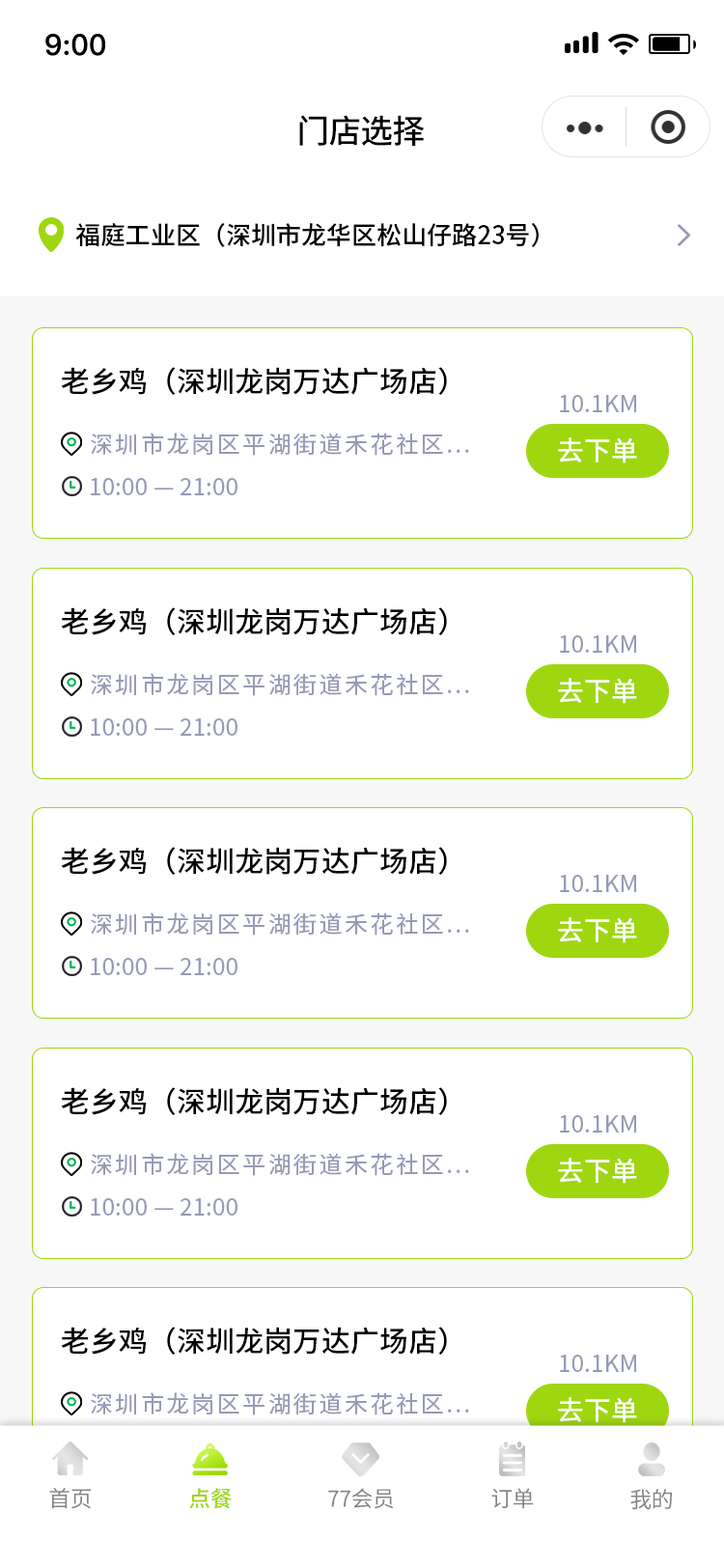
<style>
.page{position:relative;width:724px;height:1568px;background:#ffffff}
.page>*{position:absolute;margin:0}
.t1{font:29px "PingFang-SC-Bold";letter-spacing:0.02em;color:#000000}
.t2{font:32.8px "SourceHanSansCN-Medium";letter-spacing:-0.02em;color:#000000}
.t3{font:25.1px "SourceHanSansCN-Medium";color:#000000}
.t4{font:29px "SourceHanSansCN-Medium";color:#000000}
.t5{font:23.2px "SourceHanSansCN-Regular";letter-spacing:0.01em;color:#969ab6}
.t6{font:23.2px "SourceHanSansCN-Regular";letter-spacing:0.1em;color:#969ab6}
.t7{font:27px "SourceHanSansCN-Medium";color:#ffffff}
.t8{font:22.2px "SourceHanSansCN-Regular";letter-spacing:-0.02em;color:#838383}
.t9{font:22.2px "SourceHanSansCN-Medium";letter-spacing:-0.02em;color:#9ed710}
</style>
<div class="page">
<p class="t1" style="left:45px;top:34px;width:60px;height:22px">9:00</p>
<p class="t2" style="left:299px;top:115px;width:126px;height:31px">门店选择</p>
<p class="t3" style="left:75px;top:222px;width:464px;height:25px">福庭工业区（深圳市龙华区松山仔路23号）</p>
<p class="t4" style="left:61px;top:367px;width:386px;height:28px">老乡鸡（深圳龙岗万达广场店）</p>
<p class="t5" style="left:560px;top:395px;width:76px;height:17px">10.1KM</p>
<p class="t6" style="left:91px;top:433px;width:378px;height:23px">深圳市龙岗区平湖街道禾花社区...</p>
<p class="t7" style="left:558px;top:437px;width:79px;height:26px">去下单</p>
<p class="t5" style="left:91px;top:478px;width:147px;height:17px">10:00 — 21:00</p>
<p class="t4" style="left:61px;top:607px;width:386px;height:28px">老乡鸡（深圳龙岗万达广场店）</p>
<p class="t5" style="left:560px;top:635px;width:76px;height:18px">10.1KM</p>
<p class="t6" style="left:91px;top:673px;width:378px;height:23px">深圳市龙岗区平湖街道禾花社区...</p>
<p class="t7" style="left:558px;top:678px;width:79px;height:26px">去下单</p>
<p class="t5" style="left:91px;top:718px;width:147px;height:18px">10:00 — 21:00</p>
<p class="t4" style="left:61px;top:847px;width:386px;height:28px">老乡鸡（深圳龙岗万达广场店）</p>
<p class="t5" style="left:560px;top:875px;width:76px;height:17px">10.1KM</p>
<p class="t6" style="left:91px;top:912px;width:378px;height:24px">深圳市龙岗区平湖街道禾花社区...</p>
<p class="t7" style="left:558px;top:917px;width:79px;height:26px">去下单</p>
<p class="t5" style="left:91px;top:958px;width:147px;height:17px">10:00 — 21:00</p>
<p class="t4" style="left:61px;top:1087px;width:386px;height:28px">老乡鸡（深圳龙岗万达广场店）</p>
<p class="t5" style="left:560px;top:1115px;width:76px;height:18px">10.1KM</p>
<p class="t6" style="left:91px;top:1153px;width:378px;height:23px">深圳市龙岗区平湖街道禾花社区...</p>
<p class="t7" style="left:558px;top:1158px;width:79px;height:26px">去下单</p>
<p class="t5" style="left:91px;top:1198px;width:147px;height:18px">10:00 — 21:00</p>
<p class="t4" style="left:61px;top:1327px;width:386px;height:28px">老乡鸡（深圳龙岗万达广场店）</p>
<p class="t5" style="left:560px;top:1355px;width:76px;height:17px">10.1KM</p>
<p class="t6" style="left:91px;top:1392px;width:378px;height:23px">深圳市龙岗区平湖街道禾花社区...</p>
<p class="t7" style="left:558px;top:1397px;width:79px;height:26px">去下单</p>
<p class="t8" style="left:49px;top:1488px;width:42px;height:21px">首页</p>
<p class="t9" style="left:189px;top:1488px;width:43px;height:21px">点餐</p>
<p class="t8" style="left:328px;top:1488px;width:66px;height:21px">77会员</p>
<p class="t8" style="left:491px;top:1488px;width:43px;height:21px">订单</p>
<p class="t8" style="left:630px;top:1489px;width:42px;height:21px">我的</p>
</div>
